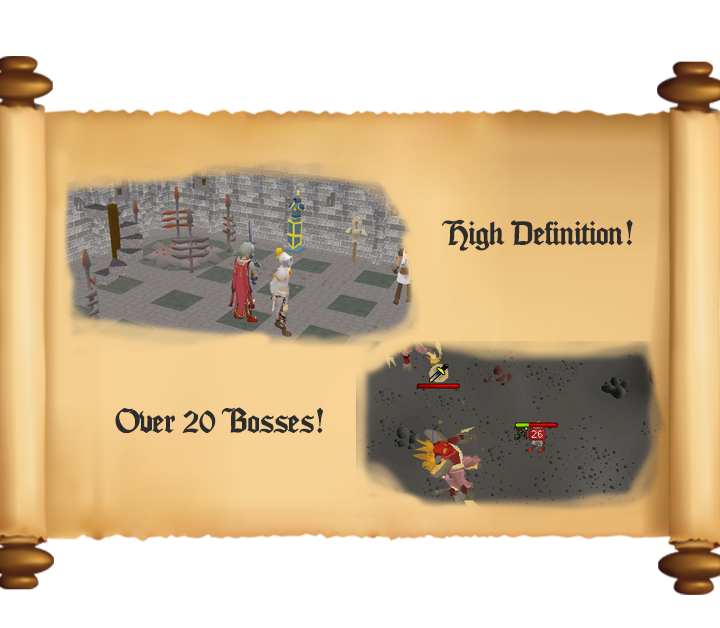
<style>
.page{position:relative;width:720px;height:628px;background:#ffffff}
.page>*{position:absolute;margin:0}
.t1{font:30px "Seagramtfb";letter-spacing:-0.03em;color:#2c2c2c}
</style>
<div class="page">
<p class="t1" style="left:442px;top:219px;width:191px;height:32px">High Definition!</p>
<p class="t1" style="left:115px;top:407px;width:208px;height:27px">Over 20 Bosses!</p>
</div>
